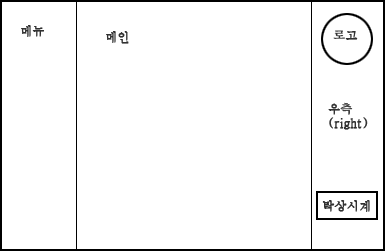
<style>
.page{position:relative;width:385px;height:251px;background:#ffffff}
.page>*{position:absolute;margin:0}
.t1{font:12px "Haansoft-Batang";color:#313131;font-weight:bold}
</style>
<div class="page">
<p class="t1" style="left:21px;top:25px;width:23px;height:12px">메뉴</p>
<p class="t1" style="left:333px;top:30px;width:25px;height:10px">로고</p>
<p class="t1" style="left:106px;top:31px;width:23px;height:13px">메인</p>
<p class="t1" style="left:328px;top:102px;width:40px;height:28px">우측<br>(right)</p>
<p class="t1" style="left:322px;top:200px;width:48px;height:12px">탁상시계</p>
</div>
